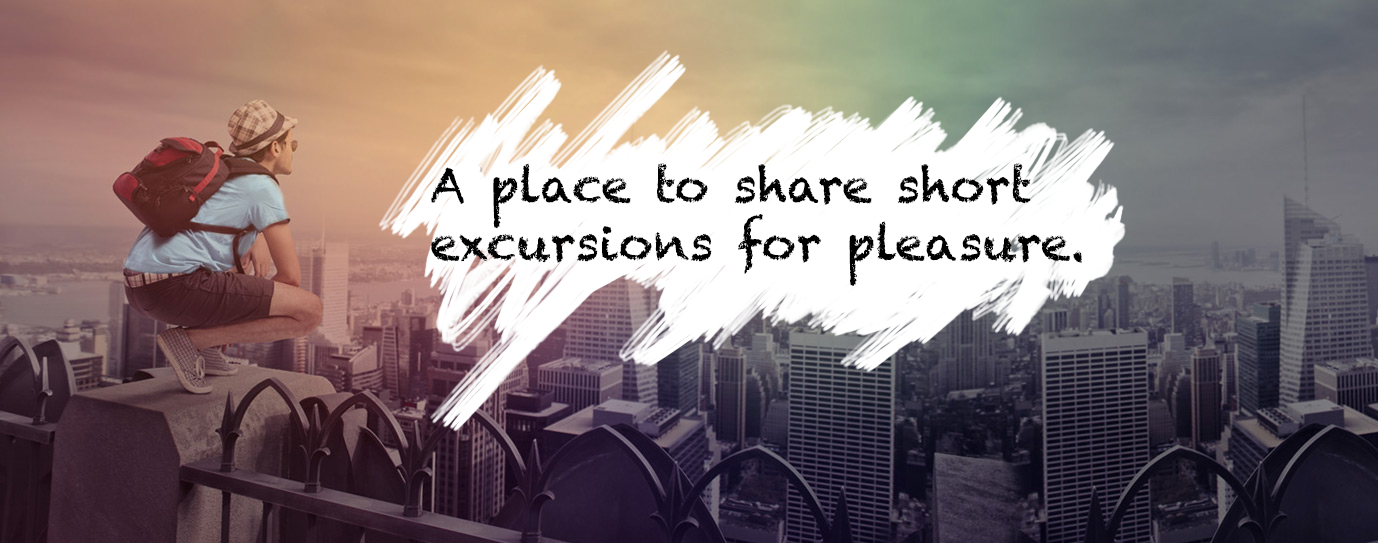
<style>
.page{position:relative;width:1378px;height:543px}
.page>*{position:absolute;margin:0}
.t1{font:48px "Chalkduster";color:#000000}
</style>
<div class="page">
<p class="t1" style="left:431px;top:163px;width:651px;height:123px">A place to share short <br>excursions for pleasure.</p>
</div>
